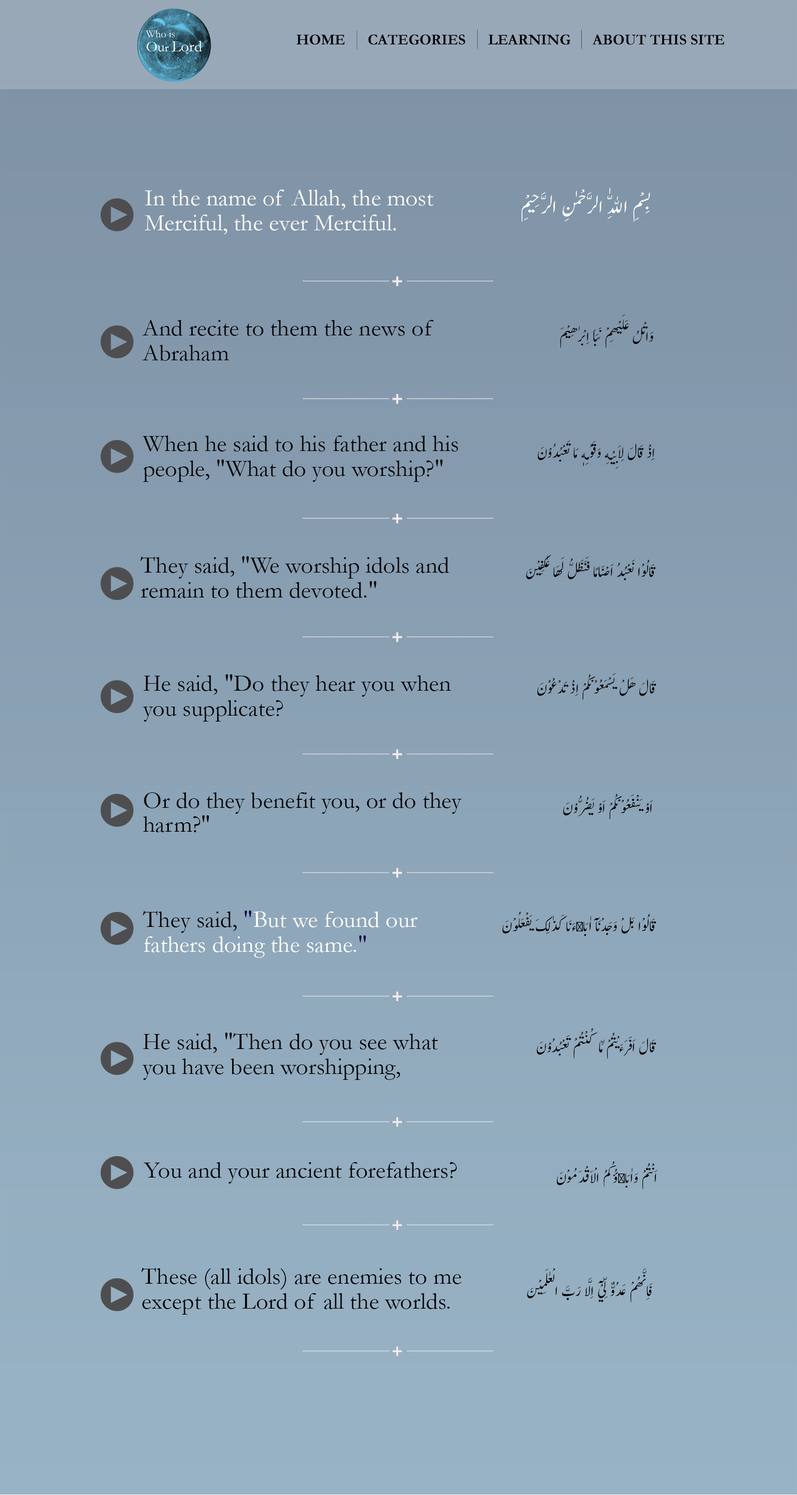
<style>
.page{position:relative;width:797px;height:1495px}
.page>*{position:absolute;margin:0}
.t1{font:15px "Garamond-Bold";color:#000000;text-transform:uppercase}
.t2{font:23.9px/24.9px "Garamond";color:#fffafa}
.t3{font:23.9px "Jameel-Noori-Nastaleeq";color:#ffffff}
.t4{font:17.9px "Jameel-Noori-Nastaleeq";color:#030303}
.t5{font:23.9px/24.9px "Garamond";color:#000000}
.t6{font:18px "Jameel-Noori-Nastaleeq";color:#000000;scale:0.97 1}
.t7{font:17.9px "Jameel-Noori-Nastaleeq";color:#000000}
.t8{font:23.9px "Garamond";color:#000000}
.t9{font:23.9px/24.9px "Garamond";color:#ffffff}
.t10{font:23.9px/24.9px "Garamond";color:#0d004c}
.t11{font:17.9px "AdobeArabic-Regular";color:#000000}
</style>
<div class="page">
<p class="t1" style="left:297px;top:34px;width:428px;height:11px">home      categories      learning      about this site</p>
<p class="t2" style="left:145px;top:189px;width:289px;height:46px">In the name of Allah, the most Merciful, the ever Merciful.</p>
<p class="t3" style="left:521px;top:187px;width:129px;height:35px">بِسْمِ اللّٰهِ الرَّحْمٰنِ الرَّحِيْمِ</p>
<p class="t4" style="left:560px;top:314px;width:94px;height:34px">وَاتْلُ عَلَيْهِمْ نَبَاَ اِبْرٰهِيْمَ</p>
<p class="t5" style="left:142px;top:320px;width:292px;height:41px">And recite to them the news of Abraham</p>
<p class="t5" style="left:143px;top:436px;width:316px;height:46px">When he said to his father and his people, "What do you worship?"</p>
<p class="t6" style="left:538px;top:440px;width:117px;height:29px">اِذْ قَالَ لِاَبِيْهِ وَقَوْمِهٖ مَا تَعْبُدُوْنَ</p>
<p class="t5" style="left:140px;top:556px;width:310px;height:42px">They said, "We worship idols and remain to them devoted."</p>
<p class="t7" style="left:526px;top:554px;width:130px;height:27px">قَالُوْا نَعْبُدُ اَصْنَامًا فَنَظَلُّ لَهَا عٰكِفِيْنَ</p>
<p class="t5" style="left:143px;top:674px;width:308px;height:48px">He said, "Do they hear you when you supplicate?</p>
<p class="t7" style="left:537px;top:673px;width:120px;height:27px">قَالَ هَلْ يَسْمَعُوْنَكُمْ اِذْ تَدْعُوْنَ</p>
<p class="t8" style="left:143px;top:792px;width:319px;height:40px">Or do they benefit you, or do they harm?"</p>
<p class="t7" style="left:563px;top:794px;width:90px;height:26px">اَوْ يَنْفَعُوْنَكُمْ اَوْ يَضُرُّوْنَ</p>
<p class="t9" style="left:143px;top:911px;width:275px;height:47px"><span class="t5">They said, </span><span class="t10">"</span>But we found our      fathers doing the same.<span class="t10">"</span></p>
<p class="t7" style="left:502px;top:912px;width:155px;height:25px">قَالُوْا بَلْ وَجَدْنَآ اٰبَا<span class="t11">ۗ</span>ءَنَا كَذٰلِكَ يَفْعَلُوْنَ</p>
<p class="t5" style="left:143px;top:1033px;width:296px;height:47px">He said, "Then do you see what you have been worshipping,</p>
<p class="t7" style="left:537px;top:1028px;width:120px;height:31px">قَالَ اَفَرَءَيْتُمْ مَّا كُنْتُمْ تَعْبُدُوْنَ</p>
<p class="t8" style="left:144px;top:1162px;width:313px;height:22px">You and your ancient forefathers?</p>
<p class="t7" style="left:557px;top:1161px;width:101px;height:29px">اَنْتُمْ وَاٰبَا<span class="t11">ۗ</span>ؤُكُمُ الْاَقْدَمُوْنَ</p>
<p class="t5" style="left:141px;top:1268px;width:321px;height:47px">These (all idols) are enemies to me except the Lord of all the worlds.</p>
<p class="t7" style="left:527px;top:1268px;width:126px;height:35px">فَاِنَّهُمْ عَدُوٌّ لِّيْٓ اِلَّا رَبَّ الْعٰلَمِيْنَ</p>
</div>
